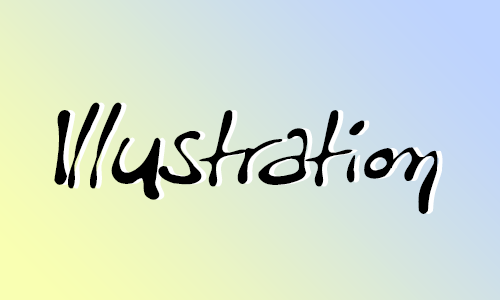
<style>
.page{position:relative;width:500px;height:300px}
.page>*{position:absolute;margin:0}
.t1{font:95.8px "PFLiberissima-Regular";letter-spacing:-0.06em;color:#000000}
</style>
<div class="page">
<p class="t1" style="left:54px;top:102px;width:384px;height:112px">Illustration</p>
</div>
